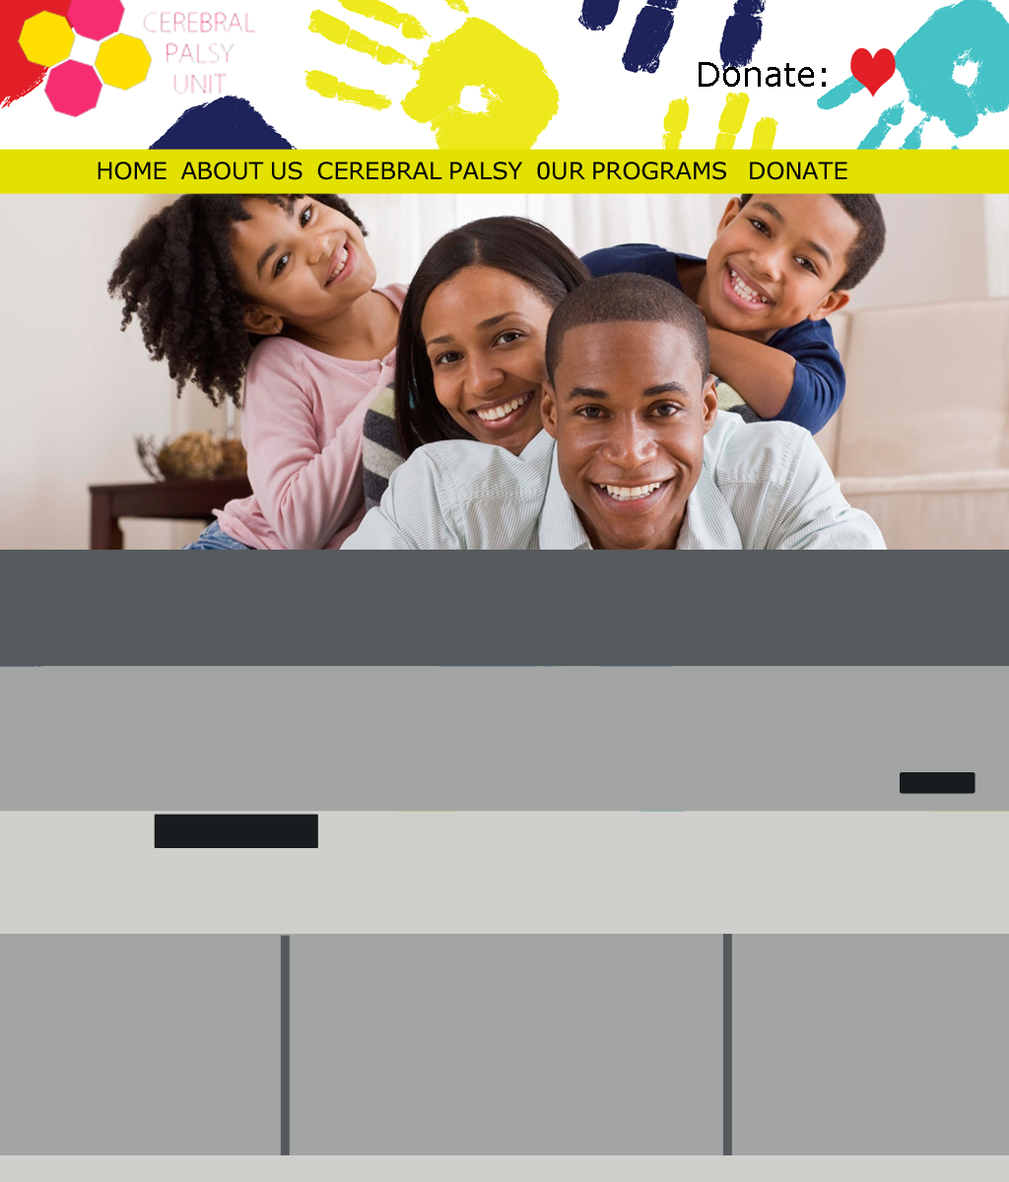
<style>
.page{position:relative;width:1009px;height:1182px;background:#a2a5a4}
.page>*{position:absolute;margin:0}
.t1{font:33.5px "Verdana";color:#000000}
.t2{font:23.6px "Verdana";color:#030404}
</style>
<div class="page">
<p class="t1" style="left:698px;top:62px;width:128px;height:25px">Donate:</p>
<p class="t2" style="left:98px;top:162px;width:749px;height:18px">HOME  ABOUT US  CEREBRAL PALSY  0UR PROGRAMS   DONATE</p>
</div>
